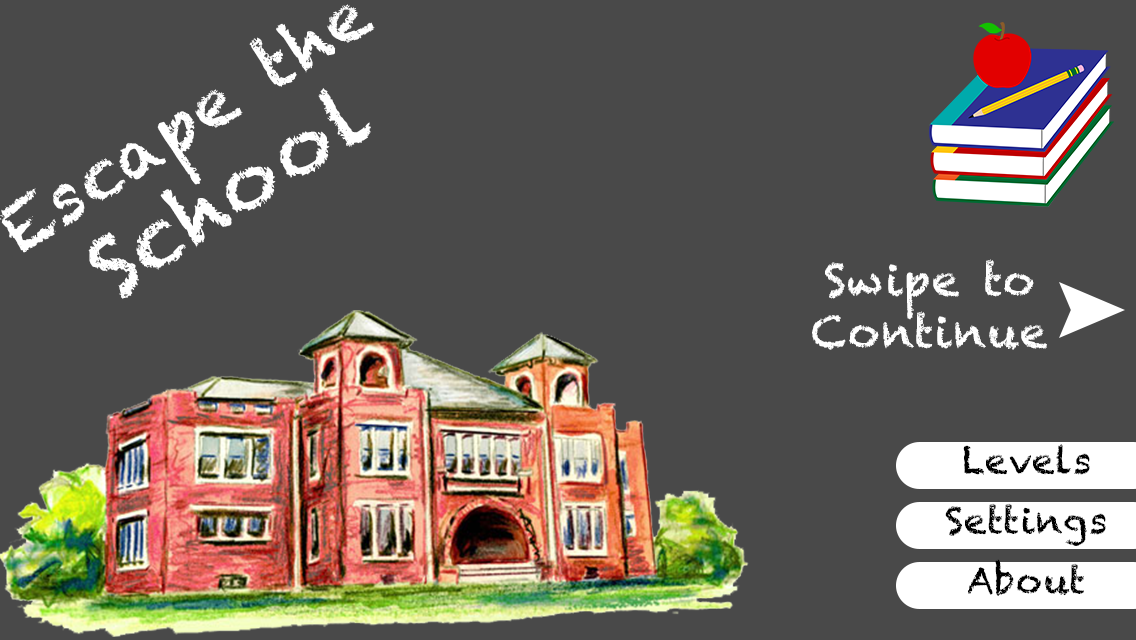
<style>
.page{position:relative;width:1136px;height:640px;background:#494949}
.page>*{position:absolute;margin:0}
.t1{font:67.9px/88.2px "Chalkduster";letter-spacing:0.025em;color:#ffffff}
.t2{font:81.5px/88.2px "Chalkduster";letter-spacing:0.025em;color:#ffffff}
.t3{font:44.1px/52.5px "Chalkduster";letter-spacing:0.025em;color:#ffffff}
.t4{font:36.2px "Chalkduster";letter-spacing:0.025em;color:#000000}
</style>
<div class="page">
<p class="t1" style="left:0px;top:4px;width:375px;height:295px;text-align:center;rotate:-33deg">Escape the <br><span class="t2">School</span></p>
<p class="t3" style="left:812px;top:259px;width:235px;height:91px;text-align:center">Swipe to <br>Continue</p>
<p class="t4" style="left:963px;top:444px;width:127px;height:31px">Levels</p>
<p class="t4" style="left:945px;top:503px;width:161px;height:43px">Settings</p>
<p class="t4" style="left:968px;top:559px;width:116px;height:37px">About</p>
</div>
